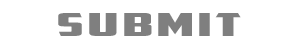
<style>
.page{position:relative;width:300px;height:50px;background:#ffffff}
.page>*{position:absolute;margin:0}
.t1{font:31.7px "AmericanCaptain";letter-spacing:0.04em;color:#7f7f7f;scale:2.29 1}
</style>
<div class="page">
<p class="t1" style="left:58px;top:13px;width:183px;height:23px">submit</p>
</div>
